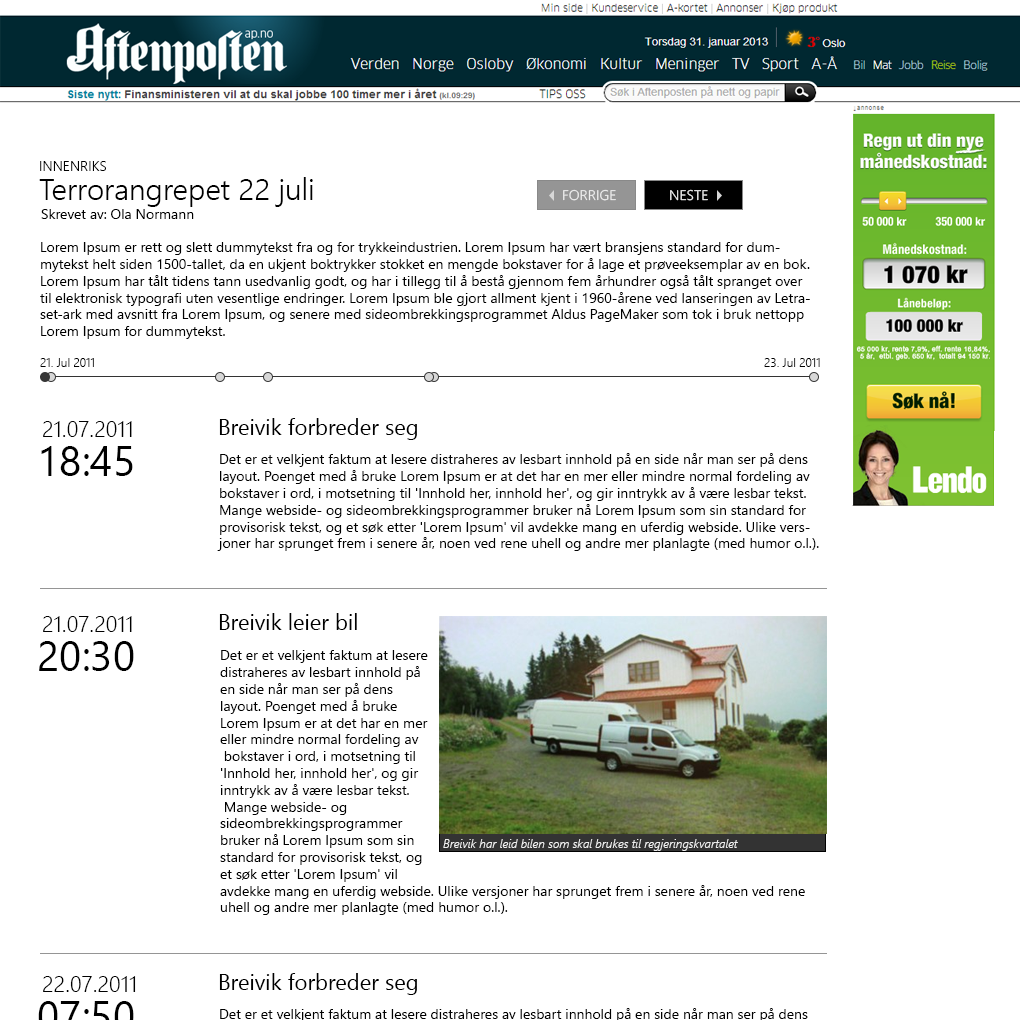
<style>
.page{position:relative;width:1020px;height:1020px;background:#ffffff}
.page>*{position:absolute;margin:0}
.t1{font:14px "SegoeUI-Semilight";color:#000000}
.t2{font:30px "SegoeUI-Semilight";color:#000000}
.t3{font:14px "SegoeUI-Semilight";color:#efefef}
.t4{font:14px "SegoeUI";color:#000000}
.t5{font:12px "SegoeUI-Semilight";color:#000000}
.t6{font:22px "SegoeUI-Semilight";color:#000000}
.t7{font:22px "SegoeUI";color:#000000}
.t8{font:41.8px "SegoeUI";color:#000000}
.t9{font:12px "SegoeUI-SemilightItalic";color:#efefef}
</style>
<div class="page">
<p class="t1" style="left:40px;top:161px;width:66px;height:10px">INNENRIKS</p>
<p class="t2" style="left:39px;top:177px;width:274px;height:30px">Terrorangrepet 22 juli</p>
<p class="t3" style="left:563px;top:189px;width:53px;height:12px">FORRIGE</p>
<p class="t3" style="left:670px;top:189px;width:38px;height:12px">NESTE</p>
<p class="t4" style="left:41px;top:209px;width:153px;height:10px">Skrevet av: Ola Normann</p>
<p class="t4" style="left:40px;top:242px;width:770px;height:97px">Lorem Ipsum er rett og slett dummytekst fra og for trykkeindustrien. Lorem Ipsum har vært bransjens standard for dummytekst helt siden 1500-tallet, da en ukjent boktrykker stokket en mengde bokstaver for å lage et prøveeksemplar av en bok. Lorem Ipsum har tålt tidens tann usedvanlig godt, og har i tillegg til å bestå gjennom fem århundrer også tålt spranget over til elektronisk typografi uten vesentlige endringer. Lorem Ipsum ble gjort allment kjent i 1960-årene ved lanseringen av Letraset-ark med avsnitt fra Lorem Ipsum, og senere med sideombrekkingsprogrammet Aldus PageMaker som tok i bruk nettopp Lorem Ipsum for dummytekst.</p>
<p class="t5" style="left:40px;top:358px;width:54px;height:9px">21. Jul 2011</p>
<p class="t5" style="left:764px;top:358px;width:56px;height:9px">23. Jul 2011</p>
<p class="t6" style="left:43px;top:421px;width:89px;height:16px">21.07.2011</p>
<p class="t7" style="left:219px;top:418px;width:198px;height:22px">Breivik forbreder seg</p>
<p class="t8" style="left:41px;top:446px;width:92px;height:30px">18:45</p>
<p class="t4" style="left:217px;top:453px;width:602px;height:98px">Det er et velkjent faktum at lesere distraheres av lesbart innhold på en side når man ser på dens layout. Poenget med å bruke Lorem Ipsum er at det har en mer eller mindre normal fordeling av bokstaver i ord, i motsetning til 'Innhold her, innhold her', og gir inntrykk av å være lesbar tekst. Mange webside- og sideombrekkingsprogrammer bruker nå Lorem Ipsum som sin standard for provisorisk tekst, og et søk etter 'Lorem Ipsum' vil avdekke mang en uferdig webside. Ulike versjoner har sprunget frem i senere år, noen ved rene uhell og andre mer planlagte (med humor o.l.).</p>
<p class="t6" style="left:43px;top:616px;width:89px;height:16px">21.07.2011</p>
<p class="t7" style="left:219px;top:613px;width:138px;height:17px">Breivik leier bil</p>
<p class="t8" style="left:39px;top:641px;width:95px;height:30px">20:30</p>
<p class="t4" style="left:220px;top:650px;width:585px;height:265px">Det er et velkjent faktum at lesere <br>distraheres av lesbart innhold på <br>en side når man ser på dens <br>layout. Poenget med å bruke <br>Lorem Ipsum er at det har en mer <br>eller mindre normal fordeling av<br> bokstaver i ord, i motsetning til <br>'Innhold her, innhold her', og gir <br>inntrykk av å være lesbar tekst.<br> Mange webside- og <br>sideombrekkingsprogrammer <br>bruker nå Lorem Ipsum som sin <br>standard for provisorisk tekst, og <br>et søk etter 'Lorem Ipsum' vil <br>avdekke mang en uferdig webside. Ulike versjoner har sprunget frem i senere år, noen ved rene uhell og andre mer planlagte (med humor o.l.).</p>
<p class="t9" style="left:443px;top:839px;width:295px;height:12px">Breivik har leid bilen som skal brukes til regjeringskvartalet</p>
<p class="t6" style="left:43px;top:976px;width:93px;height:16px">22.07.2011</p>
<p class="t7" style="left:219px;top:973px;width:198px;height:22px">Breivik forbreder seg</p>
</div>
